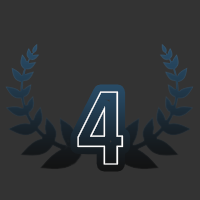
<style>
.page{position:relative;width:200px;height:200px;background:#333333}
.page>*{position:absolute;margin:0}
.t1{font:75px "GoboldHollow";color:#ffffff;scale:1.25 1}
</style>
<div class="page">
<p class="t1" style="left:77px;top:91px;width:47px;height:74px">4</p>
</div>
